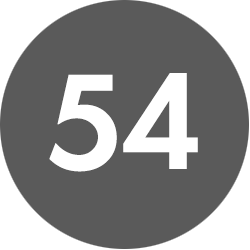
<style>
.page{position:relative;width:250px;height:250px;background:#5a5a5a}
.page>*{position:absolute;margin:0}
.t1{font:125px "FuturaND-Demibold";letter-spacing:-0.02em;color:#ffffff}
</style>
<div class="page">
<p class="t1" style="left:49px;top:73px;width:149px;height:99px">54</p>
</div>
